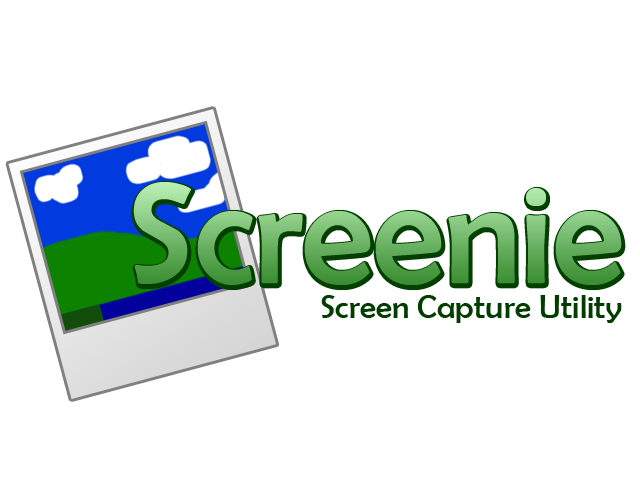
<style>
.page{position:relative;width:640px;height:480px;background:#ffffff}
.page>*{position:absolute;margin:0}
.t1{font:146.6px "BerlinSansFB-Reg"}
.t2{font:33.2px "BerlinSansFB-Reg";color:#013d01}
</style>
<div class="page">
<p class="t1" style="left:133px;top:182px;width:489px;height:103px">Screenie</p>
<p class="t2" style="left:321px;top:295px;width:301px;height:28px">Screen Capture Utility</p>
</div>
